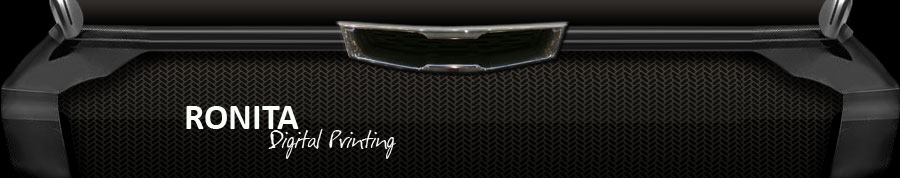
<style>
.page{position:relative;width:900px;height:178px}
.page>*{position:absolute;margin:0}
.t1{font:36px "Calibri-Bold";color:#f9fbf8}
.t2{font:24px "Festus";color:#f9fbf8}
</style>
<div class="page">
<p class="t1" style="left:186px;top:106px;width:113px;height:23px">RONITA</p>
<p class="t2" style="left:268px;top:129px;width:128px;height:30px">Digital Printing</p>
</div>
